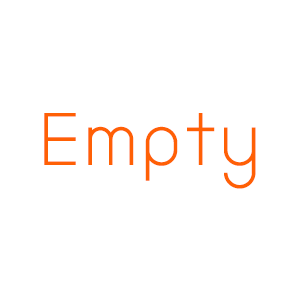
<style>
.page{position:relative;width:300px;height:300px;background:#ffffff}
.page>*{position:absolute;margin:0}
.t1{font:70.9px "BangnaNew";color:#ff6005}
</style>
<div class="page">
<p class="t1" style="left:44px;top:113px;width:212px;height:76px">Empty</p>
</div>
